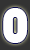
<style>
.page{position:relative;width:30px;height:50px;background:#ffffff}
.page>*{position:absolute;margin:0}
.t1{font:12px "Bauhaus93";color:#ffffff}
</style>
<div class="page">
<p class="t1" style="left:3px;top:8px;width:25px;height:35px;text-align:center">0</p>
</div>
